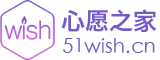
<style>
.page{position:relative;width:160px;height:60px;background:#ffffff}
.page>*{position:absolute;margin:0}
.t1{font:20px/28px "STHeiti";color:#7759cc}
.t2{font:24px/28px "HiraginoSansGB-W6";color:#7759cc}
</style>
<div class="page">
<p class="t1" style="left:61px;top:9px;width:96px;height:45px;text-align:center"><span class="t2">心愿之家<br></span>51wish.cn</p>
</div>
